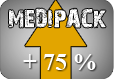
<style>
.page{position:relative;width:114px;height:79px}
.page>*{position:absolute;margin:0}
.t1{font:24.2px "28DaysLater";color:#ffffff}
.t2{font:24px "TimesNewRomanPS-BoldMT";color:#ffffff}
</style>
<div class="page">
<p class="t1" style="left:9px;top:8px;width:97px;height:20px">MEDIPACK</p>
<p class="t2" style="left:23px;top:54px;width:73px;height:16px">+ 75 %</p>
</div>
